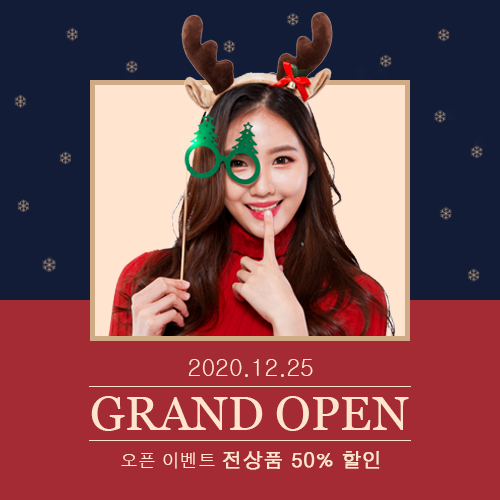
<style>
.page{position:relative;width:500px;height:500px;background:#a42a34}
.page>*{position:absolute;margin:0}
.t1{font:24px "Gulim";color:#ffe5d0}
.t2{font:48px "Georgia";color:#ffe5d0}
.t3{font:20px "H2gtrM";color:#ffe5d0;font-weight:bold}
.t4{font:18px "H2gtrM";color:#ffe5d0}
</style>
<div class="page">
<p class="t1" style="left:188px;top:359px;width:125px;height:18px">2020.12.25</p>
<p class="t2" style="left:91px;top:396px;width:318px;height:35px">GRAND OPEN</p>
<p class="t3" style="left:121px;top:451px;width:259px;height:19px"><span class="t4">오픈 이벤트 </span>전상품 50% 할인</p>
</div>
